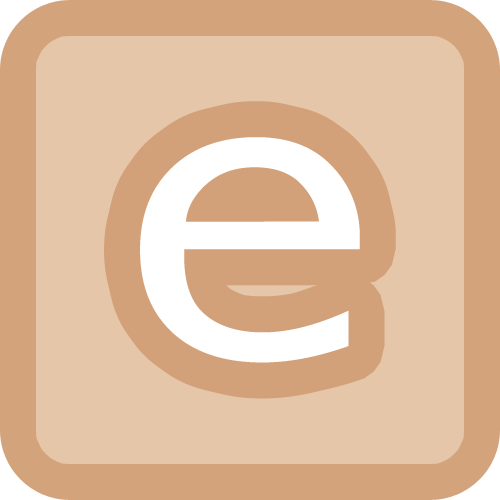
<style>
.page{position:relative;width:500px;height:500px;background:#e5c6a8}
.page>*{position:absolute;margin:0}
.t1{font:392px "Menlo-Regular";color:#ffffff;scale:1.15 1}
</style>
<div class="page">
<p class="t1" style="left:140px;top:137px;width:220px;height:226px">e</p>
</div>
